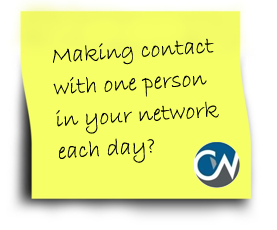
<style>
.page{position:relative;width:277px;height:230px;background:#f6ff66}
.page>*{position:absolute;margin:0}
.t1{font:24px/32px "BradleyHandITC";color:#000000}
</style>
<div class="page">
<p class="t1" style="left:53px;top:38px;width:166px;height:125px;rotate:-4deg">Making contact <br>with one person <br>in your network <br>each day?</p>
</div>
